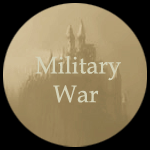
<style>
.page{position:relative;width:150px;height:150px;background:#000000}
.page>*{position:absolute;margin:0}
.t1{font:24px "BookAntiqua";color:#d3d1b7}
</style>
<div class="page">
<p class="t1" style="left:35px;top:55px;width:86px;height:48px">Military<br>   War</p>
</div>
